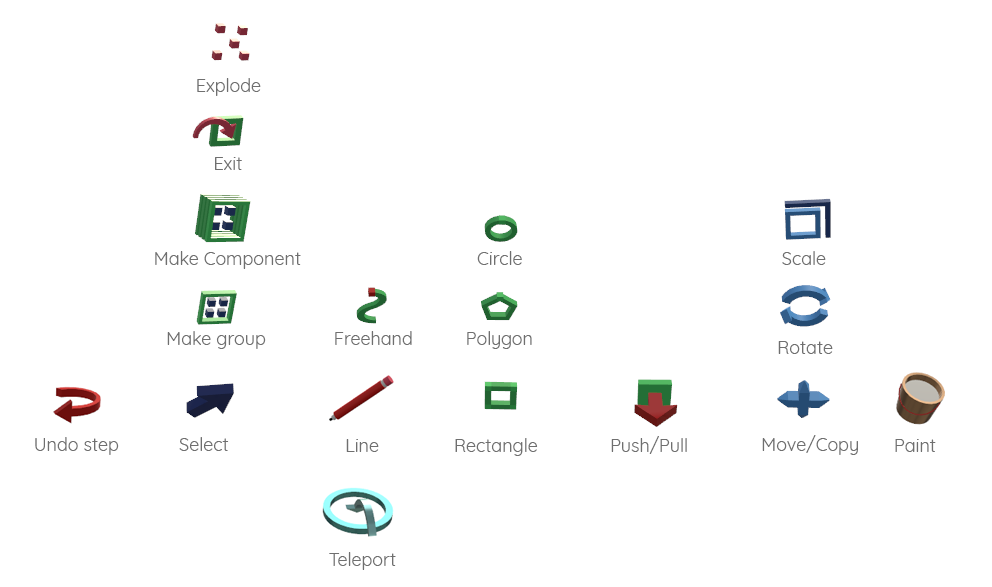
<style>
.page{position:relative;width:992px;height:587px;background:#ffffff}
.page>*{position:absolute;margin:0}
.t1{font:18px "Quicksand-Regular";color:#6f6f6f}
</style>
<div class="page">
<p class="t1" style="left:197px;top:78px;width:64px;height:18px">Explode</p>
<p class="t1" style="left:215px;top:157px;width:27px;height:13px">Exit</p>
<p class="t1" style="left:155px;top:251px;width:146px;height:18px">Make Component</p>
<p class="t1" style="left:477px;top:251px;width:45px;height:14px">Circle</p>
<p class="t1" style="left:782px;top:251px;width:44px;height:14px">Scale</p>
<p class="t1" style="left:167px;top:331px;width:99px;height:18px">Make group</p>
<p class="t1" style="left:335px;top:331px;width:77px;height:14px">Freehand</p>
<p class="t1" style="left:467px;top:331px;width:65px;height:18px">Polygon</p>
<p class="t1" style="left:778px;top:341px;width:55px;height:13px">Rotate</p>
<p class="t1" style="left:35px;top:437px;width:84px;height:18px">Undo step</p>
<p class="t1" style="left:179px;top:437px;width:50px;height:14px">Select</p>
<p class="t1" style="left:455px;top:438px;width:83px;height:18px">Rectangle</p>
<p class="t1" style="left:611px;top:436px;width:76px;height:18px">Push/Pull</p>
<p class="t1" style="left:762px;top:435px;width:96px;height:20px">Move/Copy</p>
<p class="t1" style="left:346px;top:439px;width:33px;height:13px">Line</p>
<p class="t1" style="left:895px;top:439px;width:41px;height:13px">Paint</p>
<p class="t1" style="left:329px;top:552px;width:67px;height:18px">Teleport</p>
</div>
